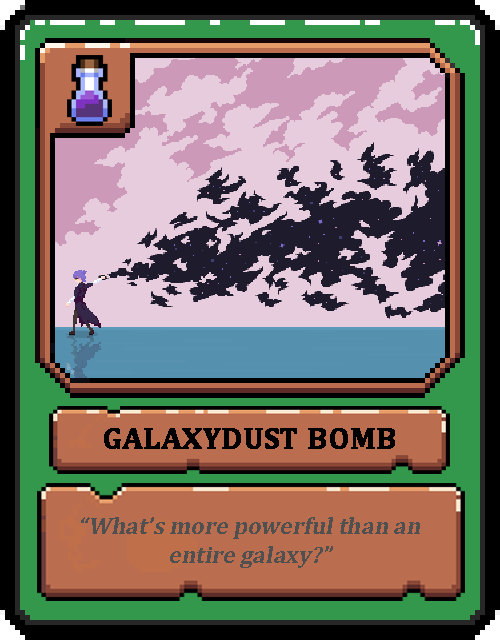
<style>
.page{position:relative;width:500px;height:640px}
.page>*{position:absolute;margin:0}
.t1{font:30px "Cambria-Bold";color:#000000;text-transform:uppercase;font-weight:bold}
.t2{font:24px "Cambria-Bold";color:#505050;font-style:italic}
</style>
<div class="page">
<p class="t1" style="left:104px;top:428px;width:291px;height:21px">GalaxyDust Bomb</p>
<p class="t2" style="left:81px;top:517px;width:339px;height:51px;text-align:center">“What’s more powerful than an entire galaxy?”</p>
</div>
